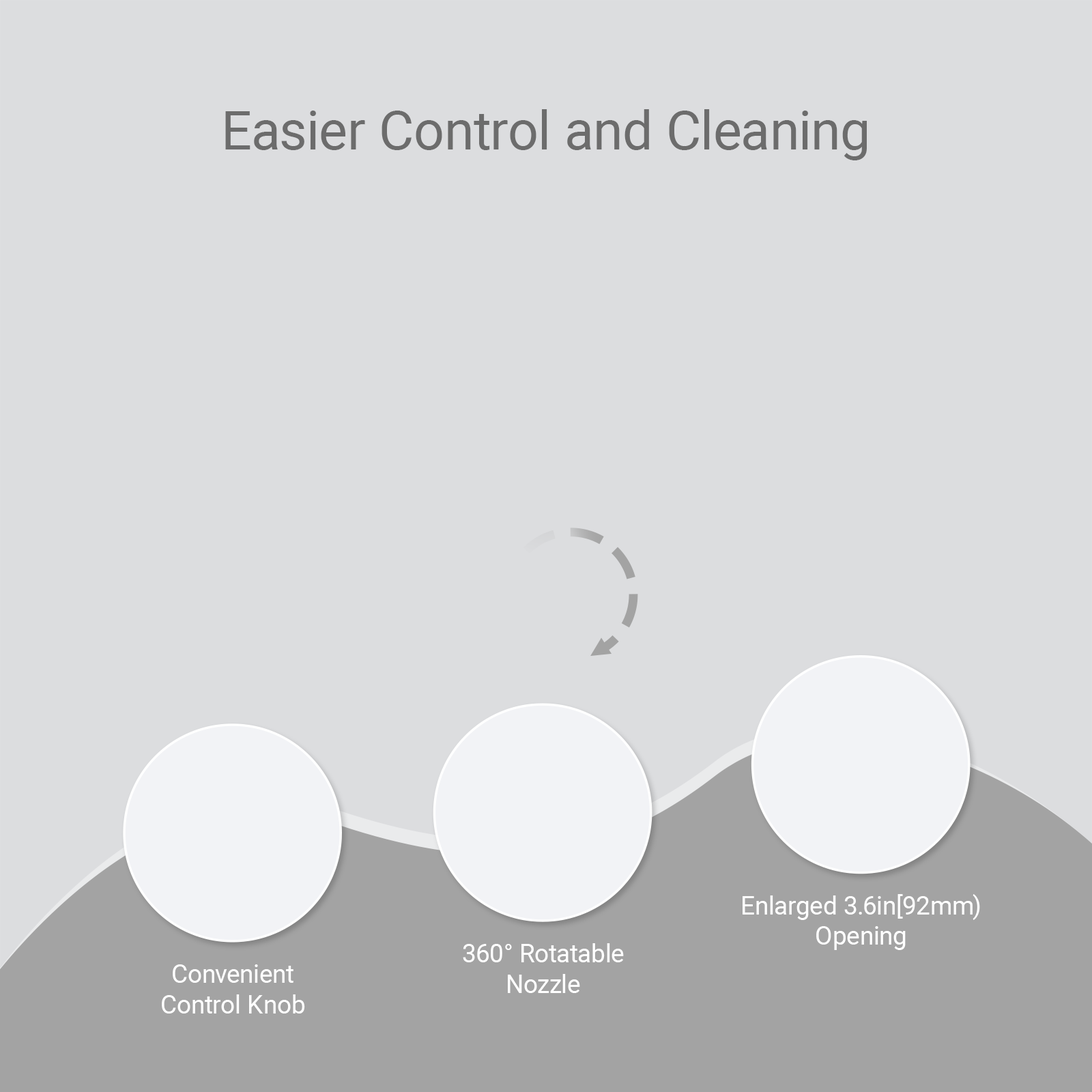
<style>
.page{position:relative;width:1092px;height:1092px;background:#dcdddf}
.page>*{position:absolute;margin:0}
.t1{font:53.7px "Roboto-Regular";color:#6c6c6c}
.t2{font:25.5px "Roboto-Regular";color:#ffffff}
</style>
<div class="page">
<p class="t1" style="left:225px;top:109px;width:642px;height:51px">Easier Control and Cleaning</p>
<p class="t2" style="left:743px;top:894px;width:237px;height:56px;text-align:center">Enlarged 3.6in[92mm)<br>Opening</p>
<p class="t2" style="left:463px;top:943px;width:161px;height:50px;text-align:center">360° Rotatable<br>Nozzle</p>
<p class="t2" style="left:162px;top:964px;width:143px;height:49px;text-align:center">Convenient<br>Control Knob</p>
</div>
